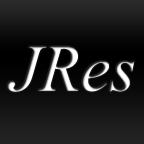
<style>
.page{position:relative;width:144px;height:144px}
.page>*{position:absolute;margin:0}
.t1{font:82.9px "Vijaya"}
</style>
<div class="page">
<p class="t1" style="left:7px;top:46px;width:128px;height:46px">JRes</p>
</div>
